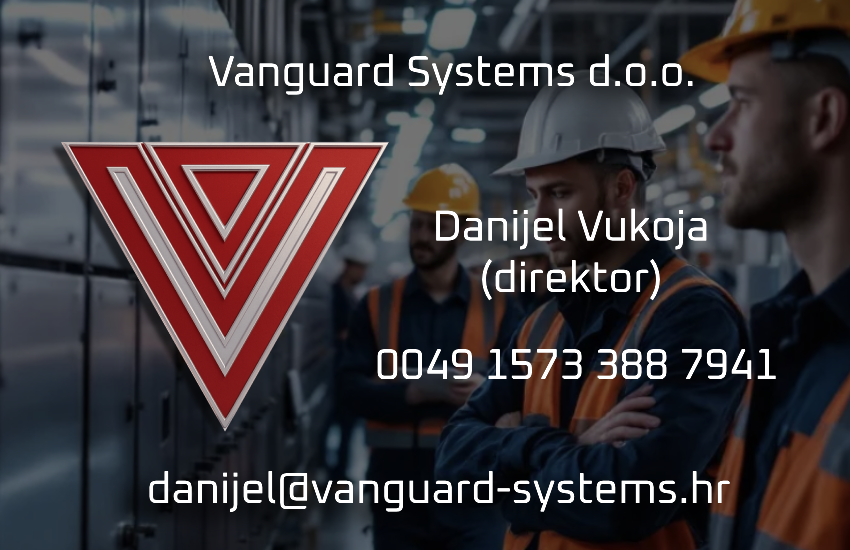
<style>
.page{position:relative;width:850px;height:550px}
.page>*{position:absolute;margin:0}
.t1{font:43px "Oxanium-Regular";color:#ffffff}
</style>
<div class="page">
<p class="t1" style="left:208px;top:54px;width:485px;height:41px">Vanguard Systems d.o.o.</p>
<p class="t1" style="left:436px;top:208px;width:271px;height:93px;text-align:center">Danijel Vukoja<br>(direktor)</p>
<p class="t1" style="left:377px;top:349px;width:399px;height:30px">0049 1573 388 7941</p>
<p class="t1" style="left:149px;top:471px;width:581px;height:41px">danijel@vanguard-systems.hr</p>
</div>
